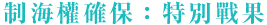
<style>
.page{position:relative;width:267px;height:25px;background:#ffffff}
.page>*{position:absolute;margin:0}
.t1{font:24px "RyuminPr6N-ExBold";letter-spacing:0.1em;color:#1cbbbf}
</style>
<div class="page">
<p class="t1" style="left:3px;top:1px;width:261px;height:23px">制海權確保：特別戰果</p>
</div>
